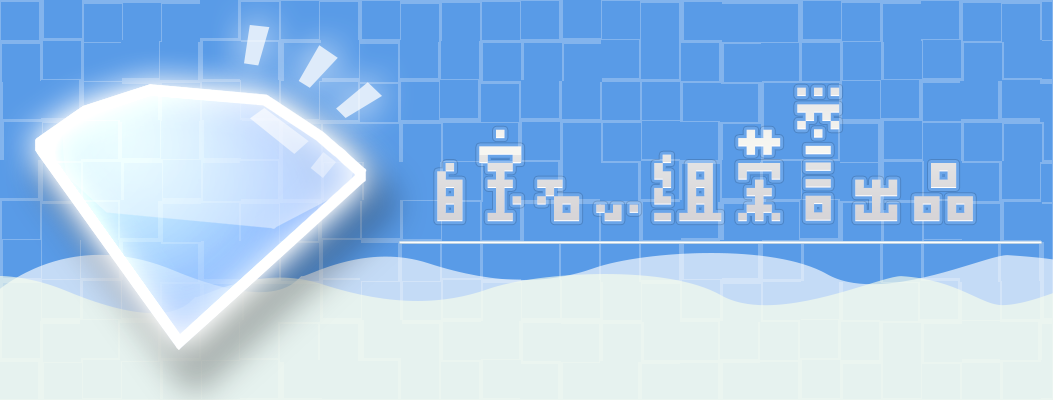
<style>
.page{position:relative;width:1053px;height:400px;background:#599be7}
.page>*{position:absolute;margin:0}
.t1{font:216.5px "FZJCXS";color:#dddcdd}
</style>
<div class="page">
<p class="t1" style="left:437px;top:87px;width:536px;height:135px">白宝石小组荣誉出品</p>
</div>
